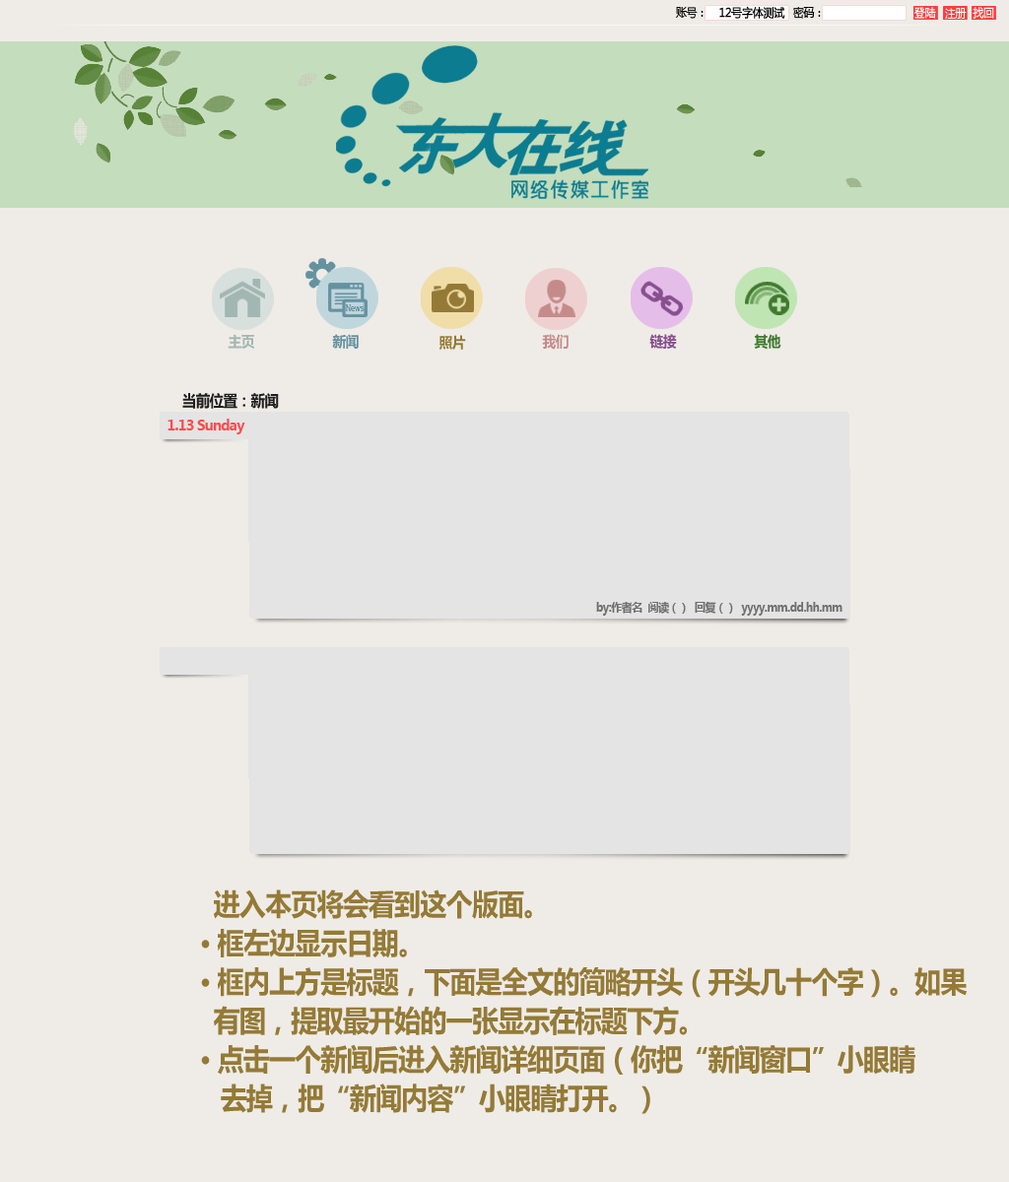
<style>
.page{position:relative;width:1009px;height:1182px;background:#efece7}
.page>*{position:absolute;margin:0}
.t1{font:11.8px "MicrosoftYaHei";letter-spacing:-0.04em;color:#000000;font-weight:bold;scale:0.91 1}
.t2{font:11.8px "MicrosoftYaHei";letter-spacing:-0.04em;color:#000000;scale:0.91 1}
.t3{font:14.8px "MicrosoftYaHei-Bold";letter-spacing:-0.04em;color:#a2b7b2;scale:0.91 1}
.t4{font:14.8px "MicrosoftYaHei-Bold";letter-spacing:-0.04em;color:#6692a0;scale:0.91 1}
.t5{font:14.8px "MicrosoftYaHei-Bold";letter-spacing:-0.04em;color:#947a36;scale:0.91 1}
.t6{font:14.8px "MicrosoftYaHei-Bold";letter-spacing:-0.04em;color:#c58b8b;scale:0.91 1}
.t7{font:14.8px "MicrosoftYaHei-Bold";letter-spacing:-0.04em;color:#884f8e;scale:0.91 1}
.t8{font:14.8px "MicrosoftYaHei-Bold";letter-spacing:-0.04em;color:#40792e;scale:0.91 1}
.t9{font:15.8px "MicrosoftYaHei-Bold";letter-spacing:-0.04em;color:#1f1f1f;scale:0.91 1}
.t10{font:14.8px "MicrosoftYaHei-Bold";letter-spacing:-0.04em;color:#fc4c4c;scale:0.91 1}
.t11{font:11.8px "MicrosoftYaHei-Bold";letter-spacing:-0.04em;color:#6f6f6f;scale:0.91 1}
.t12{font:29.6px/38.8px "MicrosoftYaHei-Bold";letter-spacing:-0.04em;color:#947a36;scale:0.91 1}
</style>
<div class="page">
<p class="t1" style="left:719px;top:6px;width:66px;height:13px">12号字体测试</p>
<p class="t2" style="left:676px;top:7px;width:27px;height:12px">账号：</p>
<p class="t2" style="left:793px;top:7px;width:28px;height:12px">密码：</p>
<p class="t3" style="left:228px;top:334px;width:27px;height:15px">主页</p>
<p class="t4" style="left:332px;top:334px;width:27px;height:15px">新闻</p>
<p class="t5" style="left:438px;top:335px;width:28px;height:15px">照片</p>
<p class="t6" style="left:542px;top:334px;width:26px;height:16px">我们</p>
<p class="t7" style="left:649px;top:334px;width:28px;height:15px">链接</p>
<p class="t8" style="left:754px;top:334px;width:27px;height:16px">其他</p>
<p class="t9" style="left:182px;top:393px;width:97px;height:16px">当前位置：新闻</p>
<p class="t10" style="left:167px;top:419px;width:78px;height:15px">1.13 Sunday</p>
<p class="t11" style="left:596px;top:601px;width:246px;height:15px">by:作者名  阅读（）  回复（）  yyyy.mm.dd.hh.mm</p>
<p class="t12" style="left:201px;top:890px;width:766px;height:224px">进入本页将会看到这个版面。<br>· 框左边显示日期。<br>· 框内上方是标题，下面是全文的简略开头（开头几十个字）。如果<br>  有图，提取最开始的一张显示在标题下方。<br>· 点击一个新闻后进入新闻详细页面（你把“新闻窗口”小眼睛<br>   去掉，把“新闻内容”小眼睛打开。）</p>
</div>
